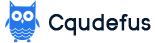
<style>
.page{position:relative;width:155px;height:43px;background:#ffffff}
.page>*{position:absolute;margin:0}
.t1{font:23.5px "Grotte-Regular";letter-spacing:-0.03em;color:#071a33;font-weight:bold}
</style>
<div class="page">
<p class="t1" style="left:49px;top:14px;width:102px;height:22px">Cqudefus</p>
</div>
